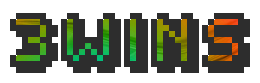
<style>
.page{position:relative;width:260px;height:83px;background:#ffffff}
.page>*{position:absolute;margin:0}
.t1{font:48px "Fipps-Regular";letter-spacing:0.06em;color:#2d2d2d}
</style>
<div class="page">
<p class="t1" style="left:10px;top:13px;width:240px;height:60px">3WINS</p>
</div>
